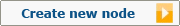
<style>
.page{position:relative;width:180px;height:26px;background:#f8f8f8}
.page>*{position:absolute;margin:0}
.t1{font:12px "Verdana-Bold";color:#0d5387}
</style>
<div class="page">
<p class="t1" style="left:21px;top:8px;width:114px;height:10px">Create new node</p>
</div>
